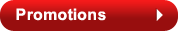
<style>
.page{position:relative;width:178px;height:31px;background:#980e0e}
.page>*{position:absolute;margin:0}
.t1{font:16px "Arial-BoldMT";letter-spacing:0.014em;color:#ffffff}
</style>
<div class="page">
<p class="t1" style="left:16px;top:8px;width:90px;height:13px">Promotions</p>
</div>
